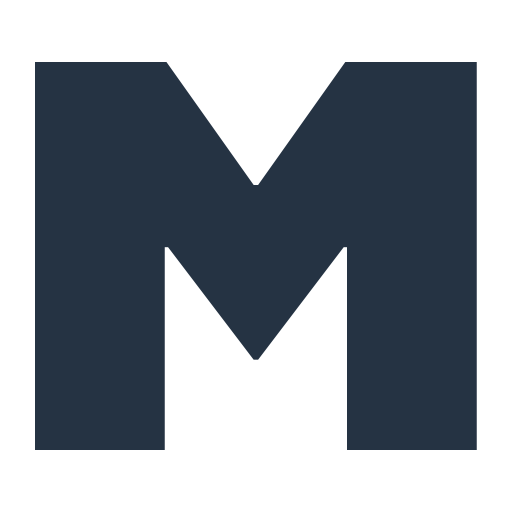
<style>
.page{position:relative;width:512px;height:512px;background:#253343}
.page>*{position:absolute;margin:0}
.t1{font:554.7px "Alfarn";color:#253343}
</style>
<div class="page">
<p class="t1" style="left:35px;top:62px;width:442px;height:388px">M</p>
</div>
